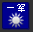
<style>
.page{position:relative;width:33px;height:32px;background:#000090}
.page>*{position:absolute;margin:0}
.t1{font:10.4px "SimSun";color:#ffffff}
</style>
<div class="page">
<p class="t1" style="left:7px;top:4px;width:18px;height:8px">一军</p>
</div>
